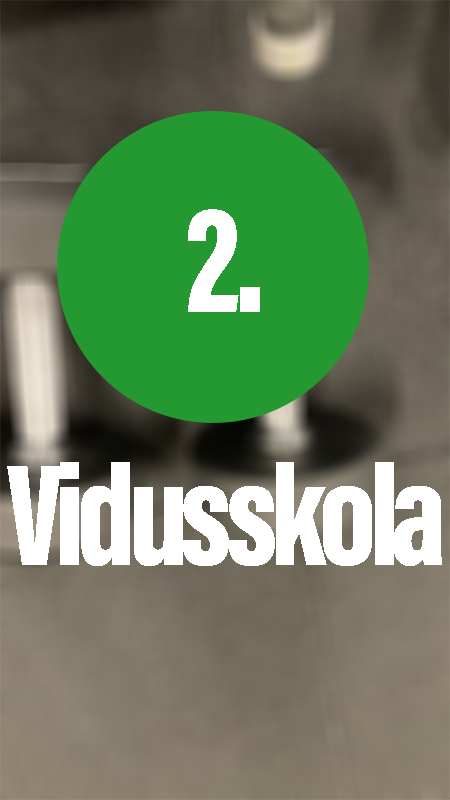
<style>
.page{position:relative;width:450px;height:800px;background:#249831}
.page>*{position:absolute;margin:0}
.t1{font:156.2px "AcuminConcept-ExtraCondensedBlack";letter-spacing:-0.05em;color:#ffffff}
.t2{font:148.4px "AcuminConcept-ExtraCondensedBlack";letter-spacing:-0.05em;color:#ffffff}
</style>
<div class="page">
<p class="t1" style="left:188px;top:209px;width:72px;height:103px">2.</p>
<p class="t2" style="left:7px;top:462px;width:435px;height:104px">Vidusskola</p>
</div>
